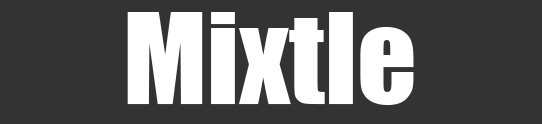
<style>
.page{position:relative;width:542px;height:124px;background:#333333}
.page>*{position:absolute;margin:0}
.t1{font:116.7px "Impact";color:#ffffff}
</style>
<div class="page">
<p class="t1" style="left:127px;top:12px;width:287px;height:93px">Mixtle</p>
</div>
